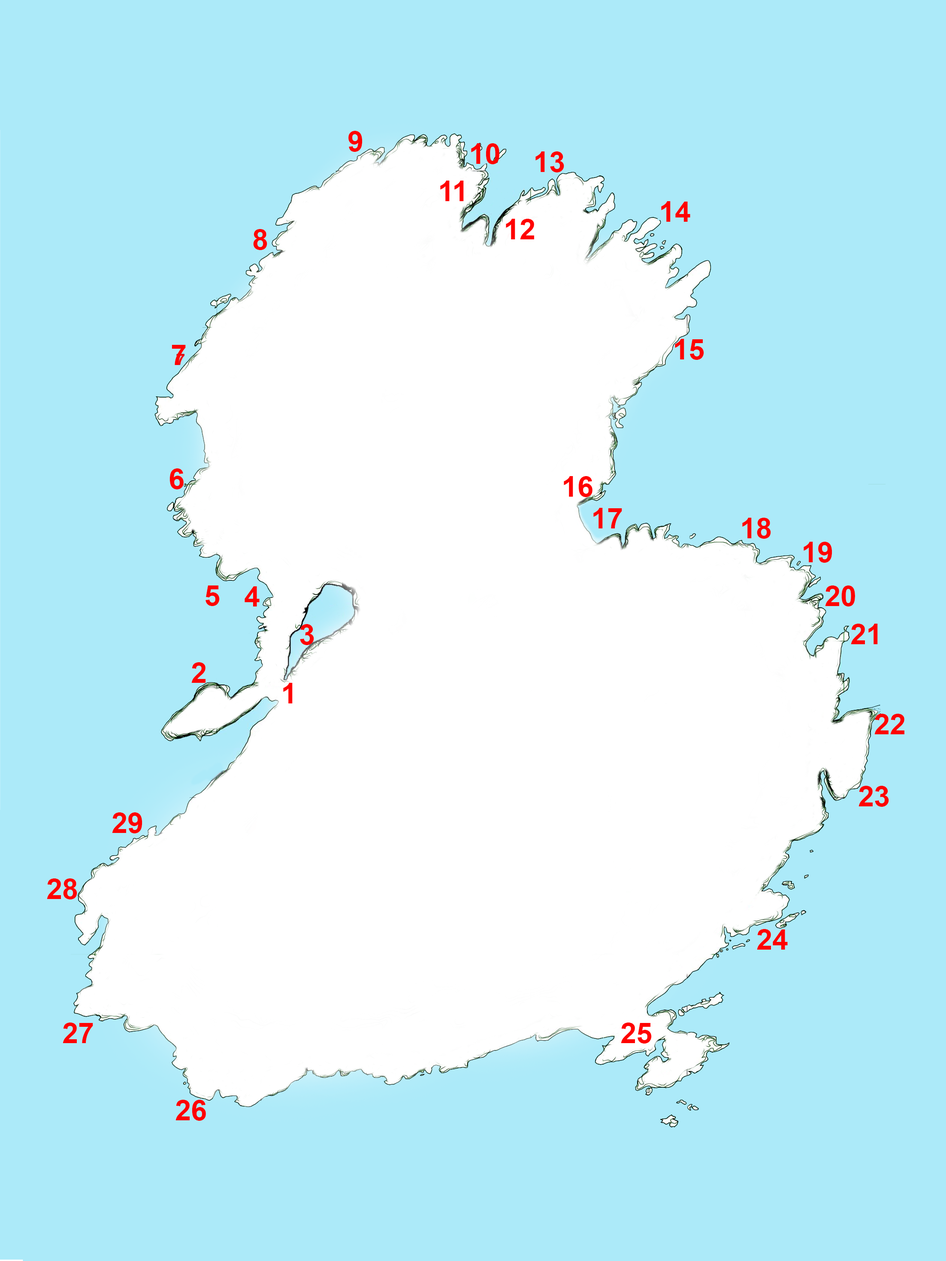
<style>
.page{position:relative;width:946px;height:1261px;background:#aceaf9}
.page>*{position:absolute;margin:0}
.t1{font:28.6px "Arial-BoldMT";color:#ff0201}
</style>
<div class="page">
<p class="t1" style="left:348px;top:131px;width:14px;height:21px">9</p>
<p class="t1" style="left:471px;top:143px;width:28px;height:21px">10</p>
<p class="t1" style="left:535px;top:151px;width:29px;height:21px">13</p>
<p class="t1" style="left:440px;top:181px;width:24px;height:20px">11</p>
<p class="t1" style="left:661px;top:201px;width:29px;height:21px">14</p>
<p class="t1" style="left:506px;top:219px;width:28px;height:20px">12</p>
<p class="t1" style="left:253px;top:229px;width:14px;height:21px">8</p>
<p class="t1" style="left:675px;top:339px;width:29px;height:21px">15</p>
<p class="t1" style="left:172px;top:345px;width:14px;height:20px">7</p>
<p class="t1" style="left:169px;top:468px;width:15px;height:21px">6</p>
<p class="t1" style="left:564px;top:476px;width:28px;height:21px">16</p>
<p class="t1" style="left:593px;top:508px;width:29px;height:20px">17</p>
<p class="t1" style="left:742px;top:518px;width:29px;height:21px">18</p>
<p class="t1" style="left:803px;top:542px;width:29px;height:21px">19</p>
<p class="t1" style="left:205px;top:585px;width:15px;height:21px">5</p>
<p class="t1" style="left:244px;top:586px;width:15px;height:20px">4</p>
<p class="t1" style="left:825px;top:585px;width:30px;height:21px">20</p>
<p class="t1" style="left:300px;top:624px;width:14px;height:21px">3</p>
<p class="t1" style="left:850px;top:624px;width:27px;height:20px">21</p>
<p class="t1" style="left:191px;top:662px;width:14px;height:21px">2</p>
<p class="t1" style="left:283px;top:683px;width:9px;height:20px">1</p>
<p class="t1" style="left:874px;top:714px;width:30px;height:20px">22</p>
<p class="t1" style="left:858px;top:786px;width:31px;height:21px">23</p>
<p class="t1" style="left:112px;top:812px;width:30px;height:21px">29</p>
<p class="t1" style="left:47px;top:878px;width:30px;height:21px">28</p>
<p class="t1" style="left:757px;top:929px;width:30px;height:21px">24</p>
<p class="t1" style="left:63px;top:1022px;width:30px;height:21px">27</p>
<p class="t1" style="left:621px;top:1022px;width:30px;height:21px">25</p>
<p class="t1" style="left:175px;top:1100px;width:31px;height:21px">26</p>
</div>
